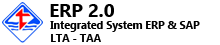
<style>
.page{position:relative;width:220px;height:45px;background:#ffffff}
.page>*{position:absolute;margin:0}
.t1{font:18.7px "Ebrima-Bold";color:#000000}
.t2{font:10.7px "Ebrima-Bold";color:#000000}
</style>
<div class="page">
<p class="t1" style="left:50px;top:4px;width:64px;height:13px">ERP 2.0</p>
<p class="t2" style="left:50px;top:21px;width:150px;height:21px">Integrated System ERP &amp; SAP<br>LTA - TAA</p>
</div>
